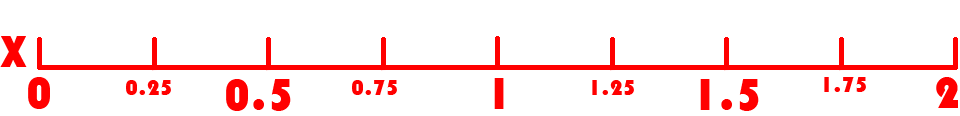
<style>
.page{position:relative;width:960px;height:116px;background:#ffffff}
.page>*{position:absolute;margin:0}
.t1{font:46px "Bauhaus93";color:#ff0000}
.t2{font:23px "Bauhaus93";color:#ff0000}
</style>
<div class="page">
<p class="t1" style="left:0px;top:36px;width:27px;height:31px">X</p>
<p class="t1" style="left:28px;top:77px;width:22px;height:32px">0</p>
<p class="t1" style="left:494px;top:78px;width:10px;height:31px">1</p>
<p class="t2" style="left:824px;top:77px;width:42px;height:15px">1.75</p>
<p class="t1" style="left:936px;top:77px;width:22px;height:31px">2</p>
<p class="t2" style="left:126px;top:80px;width:45px;height:15px">0.25</p>
<p class="t1" style="left:226px;top:79px;width:65px;height:32px">0.5</p>
<p class="t2" style="left:352px;top:80px;width:45px;height:15px">0.75</p>
<p class="t2" style="left:592px;top:80px;width:42px;height:15px">1.25</p>
<p class="t1" style="left:700px;top:79px;width:59px;height:32px">1.5</p>
</div>
